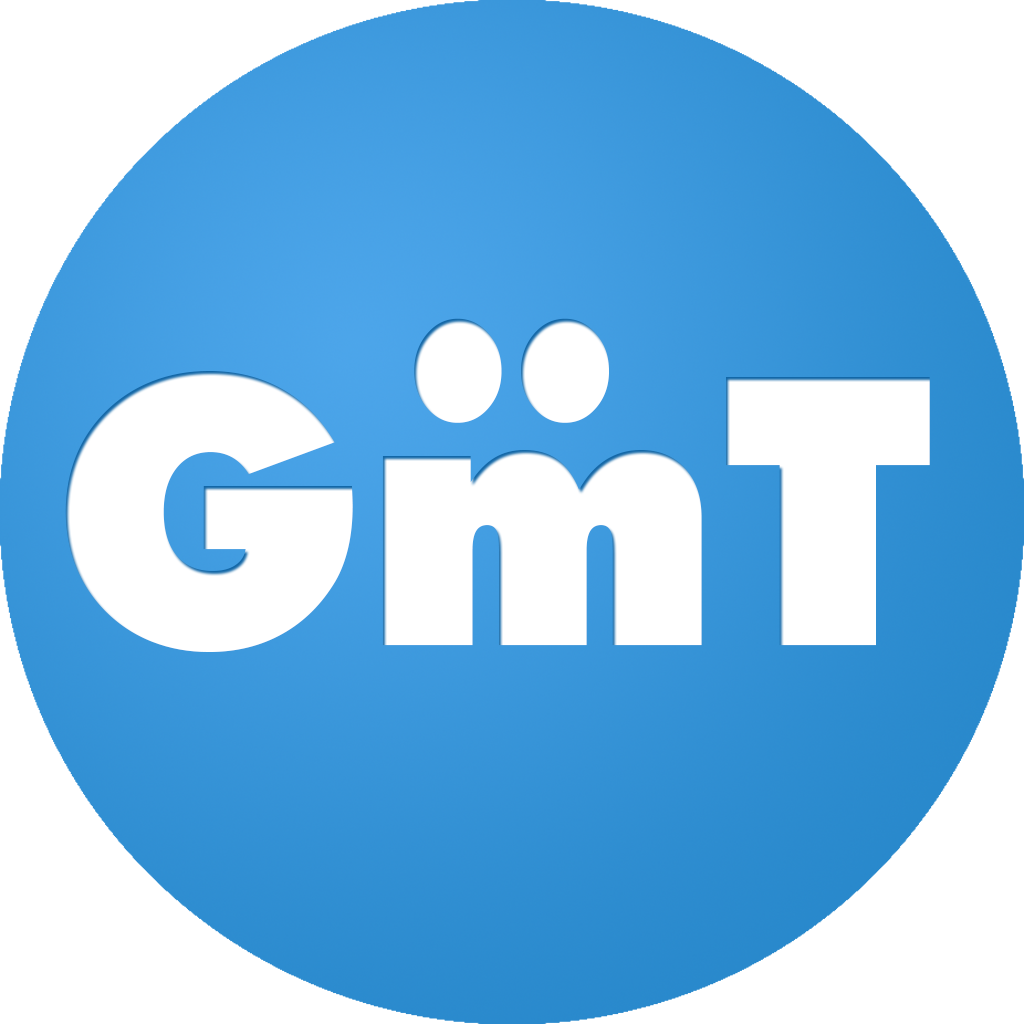
<style>
.page{position:relative;width:1024px;height:1024px;background:#ffffff}
.page>*{position:absolute;margin:0}
.t1{font:375px "FuturaBT-ExtraBlack";color:#ffffff}
</style>
<div class="page">
<p class="t1" style="left:414px;top:318px;width:195px;height:105px;rotate:-90deg">:</p>
<p class="t1" style="left:65px;top:371px;width:865px;height:281px">GmT</p>
</div>
